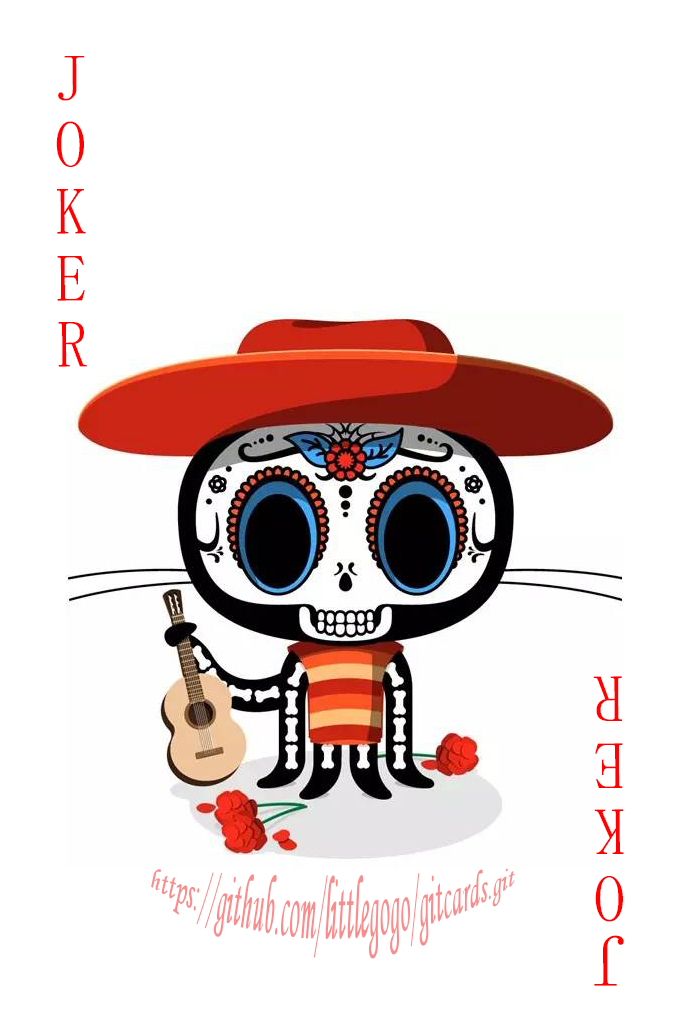
<style>
.page{position:relative;width:673px;height:1028px;background:#ffffff}
.page>*{position:absolute;margin:0}
.t1{font:66.7px/66.7px "SimSun-ExtB";color:#ff0101;scale:0.93 1}
.t2{font:75px/66.7px "SimSun-ExtB";color:#ff0101;scale:0.93 1}
.t3{font:25px/66.7px "MonotypeCorsiva";color:#f98c8c}
</style>
<div class="page">
<p class="t1" style="left:56px;top:56px;width:31px;height:311px;text-align:center">J<br>O<br>K<br>E<br>R</p>
<p class="t1" style="left:593px;top:676px;width:31px;height:310px;text-align:center;rotate:180deg"><span class="t2">J</span><br>O<br>K<br>E<br>R</p>
<p class="t3" style="left:151px;top:868px;width:364px;height:91px;text-align:center">https://github.com/littlegogo/gitcards.git</p>
</div>
